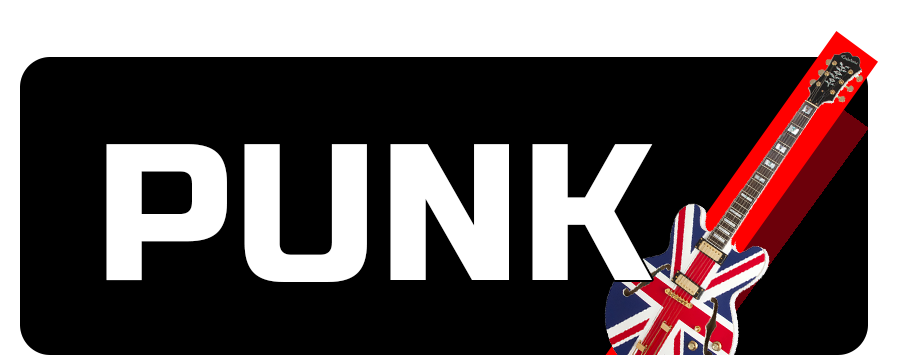
<style>
.page{position:relative;width:909px;height:355px;background:#000000}
.page>*{position:absolute;margin:0}
.t1{font:194.4px "RussoOne-Regular";color:#ffffff}
</style>
<div class="page">
<p class="t1" style="left:106px;top:144px;width:547px;height:138px">PUNK</p>
</div>
